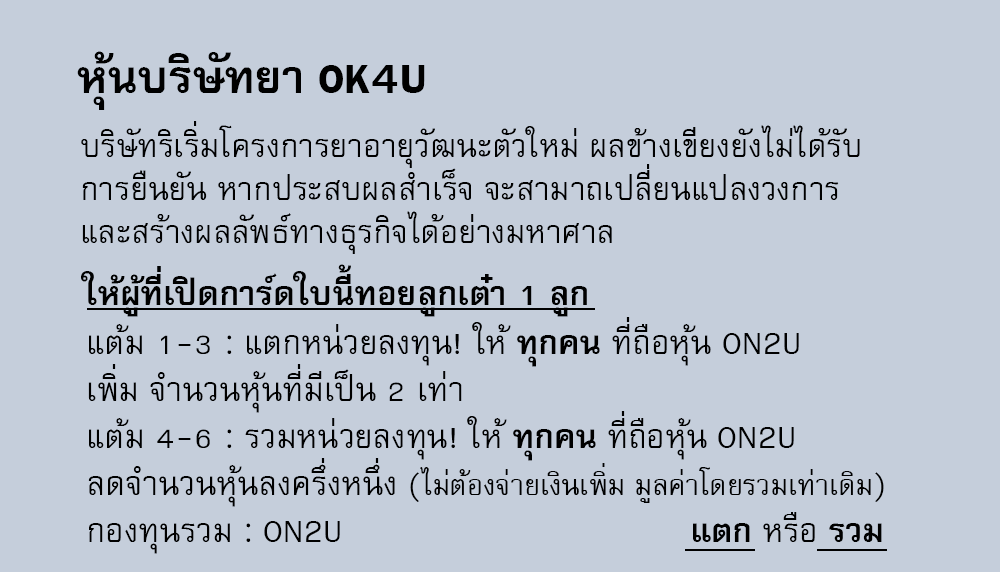
<style>
.page{position:relative;width:1000px;height:572px;background:#c5cedb}
.page>*{position:absolute;margin:0}
.t1{font:64px "FreesiaUPCBold";color:#000000}
.t2{font:45px/43px "FreesiaUPC";color:#000000}
.t3{font:47px "FreesiaUPCBold";color:#000000}
.t4{font:46px/47px "FreesiaUPC";color:#000000}
.t5{font:46px/47px "FreesiaUPCBold";color:#000000}
.t6{font:40px/47px "FreesiaUPC";color:#000000}
</style>
<div class="page">
<p class="t1" style="left:77px;top:51px;width:348px;height:59px">หุ้นบริษัทยา OK4U</p>
<p class="t2" style="left:81px;top:121px;width:779px;height:133px">บริษัทริเริ่มโครงการยาอายุวัฒนะตัวใหม่ ผลข้างเขียงยังไม่ได้รับ<br>การยืนยัน หากประสบผลสำเร็จ จะสามาถเปลี่ยนแปลงวงการ<br>และสร้างผลลัพธ์ทางธุรกิจได้อย่างมหาศาล</p>
<p class="t3" style="left:81px;top:264px;width:506px;height:53px">ให้ผู้ที่เปิดการ์ดใบนี้ทอยลูกเต๋า 1 ลูก</p>
<p class="t4" style="left:88px;top:317px;width:796px;height:237px">แต้ม 1-3 : แตกหน่วยลงทุน! ให้ <span class="t5">ทุกคน </span>ที่ถือหุ้น ON2U<br>เพิ่ม จำนวนหุ้นที่มีเป็น 2 เท่า<br>แต้ม 4-6 : รวมหน่วยลงทุน! ให้ <span class="t5">ทุกคน </span>ที่ถือหุ้น ON2U<br>ลดจำนวนหุ้นลงครึ่งหนึ่ง <span class="t6">(ไม่ต้องจ่ายเงินเพิ่ม มูลค่าโดยรวมเท่าเดิม)<br></span>กองทุนรวม : ON2U                                  <span class="t5">แตก</span> หรือ <span class="t5">รวม</span></p>
</div>
